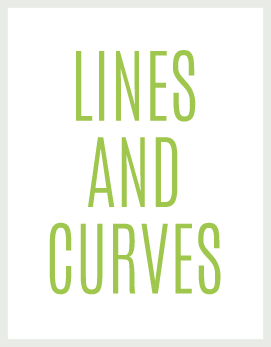
<style>
.page{position:relative;width:271px;height:347px;background:#ffffff}
.page>*{position:absolute;margin:0}
.t1{font:81.4px "Antonio-Light";color:#9fc64d;scale:0.88 1}
</style>
<div class="page">
<p class="t1" style="left:49px;top:50px;width:172px;height:245px;text-align:center">LINES<br>AND<br>CURVES</p>
</div>
